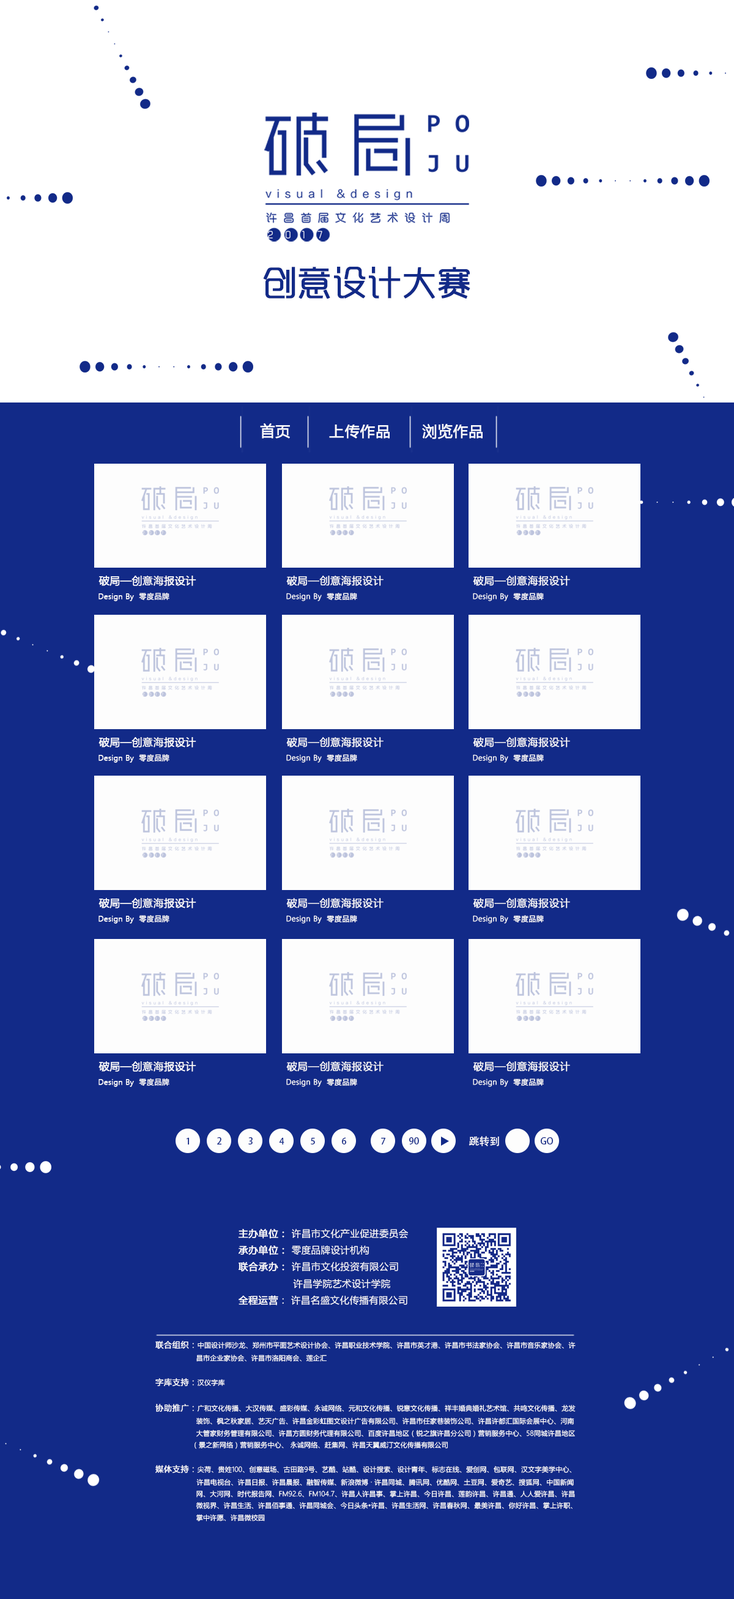
<style>
.page{position:relative;width:734px;height:1599px;background:#122a88}
.page>*{position:absolute;margin:0}
.t1{font:34.1px "RTWSYueGoTrial-Regular";color:#122a88;font-weight:bold}
.t2{font:14.7px "MicrosoftYaHei";letter-spacing:0.025em;color:#fafbfd;font-weight:bold}
.t3{font:10.2px "MicrosoftYaHeiLight";letter-spacing:0.025em;color:#fdfdfd;font-weight:bold}
.t4{font:7.3px "MicrosoftYaHeiLight";letter-spacing:0.025em;color:#fdfdfd;font-weight:bold}
.t5{font:9px "AdobeHeitiStd-Regular";color:#122a88}
.t6{font:10.5px "AdobeHeitiStd-Regular";color:#fdfdfd}
.t7{font:9.5px "MicrosoftYaHei";letter-spacing:0.025em;color:#ffffff}
.t8{font:9.5px "MicrosoftYaHei";letter-spacing:0.025em;color:#ffffff;font-weight:bold}
.t9{font:6.7px "MicrosoftYaHeiLight";letter-spacing:0.025em;color:#ffffff}
.t10{font:8px "MicrosoftYaHeiLight";letter-spacing:0.025em;color:#ffffff;font-weight:bold}
</style>
<div class="page">
<p class="t1" style="left:263px;top:266px;width:207px;height:33px">创意设计大赛</p>
<p class="t2" style="left:260px;top:423px;width:30px;height:16px">首页</p>
<p class="t2" style="left:329px;top:425px;width:61px;height:14px">上传作品</p>
<p class="t2" style="left:422px;top:424px;width:61px;height:15px">浏览作品</p>
<p class="t3" style="left:99px;top:576px;width:97px;height:10px">破局—创意海报设计</p>
<p class="t3" style="left:286px;top:576px;width:98px;height:10px">破局—创意海报设计</p>
<p class="t3" style="left:473px;top:576px;width:97px;height:10px">破局—创意海报设计</p>
<p class="t4" style="left:99px;top:593px;width:70px;height:8px">Design By  零度品牌</p>
<p class="t4" style="left:286px;top:593px;width:71px;height:8px">Design By  零度品牌</p>
<p class="t4" style="left:473px;top:593px;width:71px;height:8px">Design By  零度品牌</p>
<p class="t3" style="left:99px;top:737px;width:97px;height:11px">破局—创意海报设计</p>
<p class="t3" style="left:286px;top:737px;width:98px;height:11px">破局—创意海报设计</p>
<p class="t3" style="left:473px;top:737px;width:97px;height:11px">破局—创意海报设计</p>
<p class="t4" style="left:99px;top:754px;width:70px;height:9px">Design By  零度品牌</p>
<p class="t4" style="left:286px;top:754px;width:71px;height:9px">Design By  零度品牌</p>
<p class="t4" style="left:473px;top:754px;width:71px;height:9px">Design By  零度品牌</p>
<p class="t3" style="left:99px;top:898px;width:97px;height:11px">破局—创意海报设计</p>
<p class="t3" style="left:286px;top:898px;width:98px;height:11px">破局—创意海报设计</p>
<p class="t3" style="left:473px;top:898px;width:97px;height:11px">破局—创意海报设计</p>
<p class="t4" style="left:99px;top:915px;width:70px;height:9px">Design By  零度品牌</p>
<p class="t4" style="left:286px;top:915px;width:71px;height:9px">Design By  零度品牌</p>
<p class="t4" style="left:473px;top:915px;width:71px;height:9px">Design By  零度品牌</p>
<p class="t3" style="left:99px;top:1062px;width:97px;height:10px">破局—创意海报设计</p>
<p class="t3" style="left:286px;top:1062px;width:98px;height:10px">破局—创意海报设计</p>
<p class="t3" style="left:473px;top:1062px;width:97px;height:10px">破局—创意海报设计</p>
<p class="t4" style="left:99px;top:1079px;width:70px;height:8px">Design By  零度品牌</p>
<p class="t4" style="left:286px;top:1079px;width:71px;height:8px">Design By  零度品牌</p>
<p class="t4" style="left:473px;top:1079px;width:71px;height:8px">Design By  零度品牌</p>
<p class="t5" style="left:187px;top:1138px;width:2px;height:7px">1</p>
<p class="t5" style="left:217px;top:1137px;width:4px;height:8px">2</p>
<p class="t5" style="left:248px;top:1137px;width:5px;height:8px">3</p>
<p class="t5" style="left:279px;top:1138px;width:5px;height:7px">4</p>
<p class="t5" style="left:311px;top:1138px;width:4px;height:7px">5</p>
<p class="t5" style="left:342px;top:1137px;width:4px;height:8px">6</p>
<p class="t5" style="left:381px;top:1138px;width:4px;height:7px">7</p>
<p class="t5" style="left:409px;top:1137px;width:10px;height:8px">90</p>
<p class="t6" style="left:469px;top:1136px;width:30px;height:11px">跳转到</p>
<p class="t5" style="left:541px;top:1137px;width:12px;height:8px">GO</p>
<p class="t7" style="left:238px;top:1229px;width:170px;height:77px"><span class="t8">主办单位： </span>许昌市文化产业促进委员会 <br><span class="t8">承办单位： </span>零度品牌设计机构<br><span class="t8">联合承办： </span>许昌市文化投资有限公司 <br>                  许昌学院艺术设计学院    <br><span class="t8">全程运营</span>： 许昌名盛文化传播有限公司</p>
<p class="t9" style="left:155px;top:1341px;width:421px;height:181px"><span class="t10">联合组织：</span>中国设计师沙龙、郑州市平面艺术设计协会、许昌职业技术学院、许昌市英才港、许昌市书法家协会、许昌市音乐家协会、许<br>                   昌市企业家协会、许昌市洛阳商会、莲企汇<br><br><span class="t10">字库支持：</span>汉仪字库<br><br><span class="t10">协助推广：</span>广和文化传播、大汉传媒、盛彩传媒、永诚网络、元和文化传播、锐意文化传播、祥丰婚典婚礼艺术馆、共鸣文化传播、龙发<br>                   装饰、枫之秋家居、艺天广告、许昌金彩虹图文设计广告有限公司、许昌市任家巷装饰公司、许昌许都汇国际会展中心、河南<br>                   大管家财务管理有限公司、许昌方圆财务代理有限公司、百度许昌地区（锐之旗许昌分公司）营销服务中心、58同城许昌地区<br>                 （景之新网络）营销服务中心、 永诚网络、赶集网、许昌天翼威汀文化传播有限公司 <br><br><span class="t10">媒体支持：</span>尖荷、贵姓100、创意磁场、古田路9号、艺酷、站酷、设计搜索、设计青年、标志在线、爱创网、包联网、汉文字美学中心、<br>　　　　　　许昌电视台、许昌日报、许昌晨报、融智传媒、新浪微博 · 许昌同城、腾讯网、优酷网、土豆网、爱奇艺、搜狐网、中国新闻<br>                   网、大河网、时代报告网、FM92.6、FM104.7、许昌人许昌事、掌上许昌、今日许昌、莲韵许昌、许昌通、人人爱许昌、许昌<br>                   微视界、许昌生活、许昌佰事通、许昌同城会、今日头条•许昌、许昌生活网、许昌春秋网、最美许昌、你好许昌、掌上许职、<br>                   掌中许愿、许昌微校园</p>
</div>
